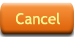
<style>
.page{position:relative;width:74px;height:37px}
.page>*{position:absolute;margin:0}
.t1{font:15px "TrebuchetMS";color:#f9f592}
</style>
<div class="page">
<p class="t1" style="left:16px;top:12px;width:44px;height:13px">Cancel</p>
</div>
